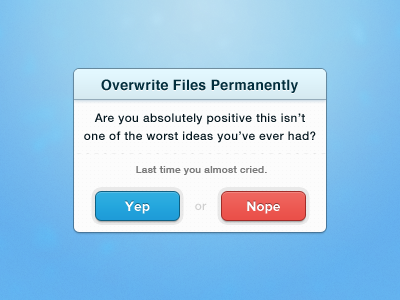
<style>
.page{position:relative;width:400px;height:300px}
.page>*{position:absolute;margin:0}
.t1{font:14px "Helvetica-Bold";letter-spacing:0.025em;color:#022e3d}
.t2{font:12px/18px "HelveticaNeue-Medium";letter-spacing:0.025em;color:#04161e}
.t3{font:10px "HelveticaNeue-Medium";letter-spacing:0.025em;color:#7b7b7b}
.t4{font:14px "ProximaNova-Bold";color:#ffffff}
.t5{font:12px "HelveticaNeue-Medium";color:#cecece}
</style>
<div class="page">
<p class="t1" style="left:101px;top:79px;width:197px;height:14px">Overwrite Files Permanently</p>
<p class="t2" style="left:84px;top:113px;width:232px;height:30px;text-align:center">Are you absolutely positive this isn’t one of the worst ideas you’ve ever had?</p>
<p class="t3" style="left:136px;top:166px;width:131px;height:9px">Last time you almost cried.</p>
<p class="t4" style="left:124px;top:201px;width:26px;height:13px">Yep</p>
<p class="t5" style="left:195px;top:203px;width:12px;height:7px">or</p>
<p class="t4" style="left:247px;top:201px;width:33px;height:13px">Nope</p>
</div>
